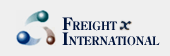
<style>
.page{position:relative;width:170px;height:56px;background:#efefef}
.page>*{position:absolute;margin:0}
.t1{font:11.5px/15px "CenturyOldStyleStd-Bold";color:#00133b;scale:0.95 1}
.t2{font:17px/15px "CenturyOldStyleStd-Bold";color:#00133b;scale:0.95 1}
</style>
<div class="page">
<p class="t1" style="left:62px;top:17px;width:98px;height:29px"><span class="t2">F</span>REIGHT<br><span class="t2">I</span>NTERNATIONAL</p>
</div>
